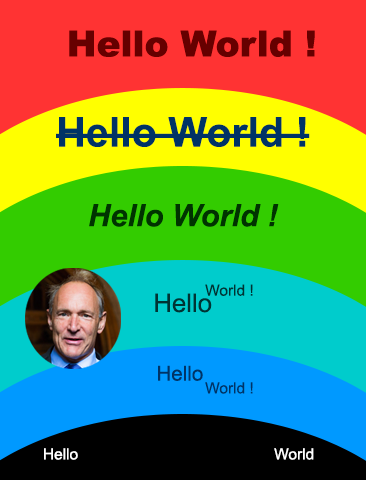
<style>
.page{position:relative;width:366px;height:480px}
.page>*{position:absolute;margin:0}
.t1{font:36px "Arial-Black";color:#660000}
.t2{font:41.2px "Arial-BoldMT";color:#003366}
.t3{font:30.9px "Arial-BoldItalicMT";color:#003300}
.t4{font:25.7px "ArialMT";color:#003333}
.t5{font:15.4px "ArialMT";color:#003333}
.t6{font:20.6px "ArialMT";color:#003366}
.t7{font:15.4px "ArialMT";color:#003366}
.t8{font:15.4px "ArialMT";color:#ffffff}
</style>
<div class="page">
<p class="t1" style="left:69px;top:30px;width:246px;height:27px">Hello World !</p>
<p class="t2" style="left:56px;top:117px;width:254px;height:30px">Hello World !</p>
<p class="t3" style="left:89px;top:204px;width:190px;height:23px">Hello World !</p>
<p class="t4" style="left:155px;top:293px;width:57px;height:20px">Hello</p>
<p class="t5" style="left:205px;top:284px;width:48px;height:12px">World !</p>
<p class="t6" style="left:158px;top:365px;width:45px;height:16px">Hello</p>
<p class="t7" style="left:205px;top:382px;width:48px;height:12px">World !</p>
<p class="t8" style="left:44px;top:448px;width:34px;height:12px">Hello</p>
<p class="t8" style="left:274px;top:448px;width:40px;height:12px">World</p>
</div>
